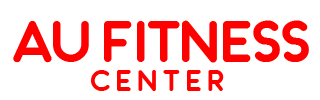
<style>
.page{position:relative;width:320px;height:100px;background:#ffffff}
.page>*{position:absolute;margin:0}
.t1{font:60px "Knigsberg";color:#ff0000}
.t2{font:30px "Knigsberg";color:#ff0000}
</style>
<div class="page">
<p class="t1" style="left:13px;top:20px;width:296px;height:43px">AU fitness</p>
<p class="t2" style="left:91px;top:70px;width:133px;height:21px">c e n t e r</p>
</div>
